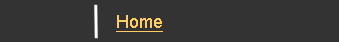
<style>
.page{position:relative;width:339px;height:42px;background:#333333}
.page>*{position:absolute;margin:0}
.t1{font:18px "ArialMT";color:#ffcc66;text-decoration:underline}
</style>
<div class="page">
<p class="t1" style="left:116px;top:15px;width:47px;height:17px">Home</p>
</div>
